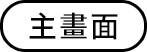
<style>
.page{position:relative;width:147px;height:52px;background:#ffffff}
.page>*{position:absolute;margin:0}
.t1{font:29.2px "NotoSansCJKtc-Medium";letter-spacing:0.06em;color:#060606}
</style>
<div class="page">
<p class="t1" style="left:29px;top:12px;width:89px;height:28px">主畫面</p>
</div>
